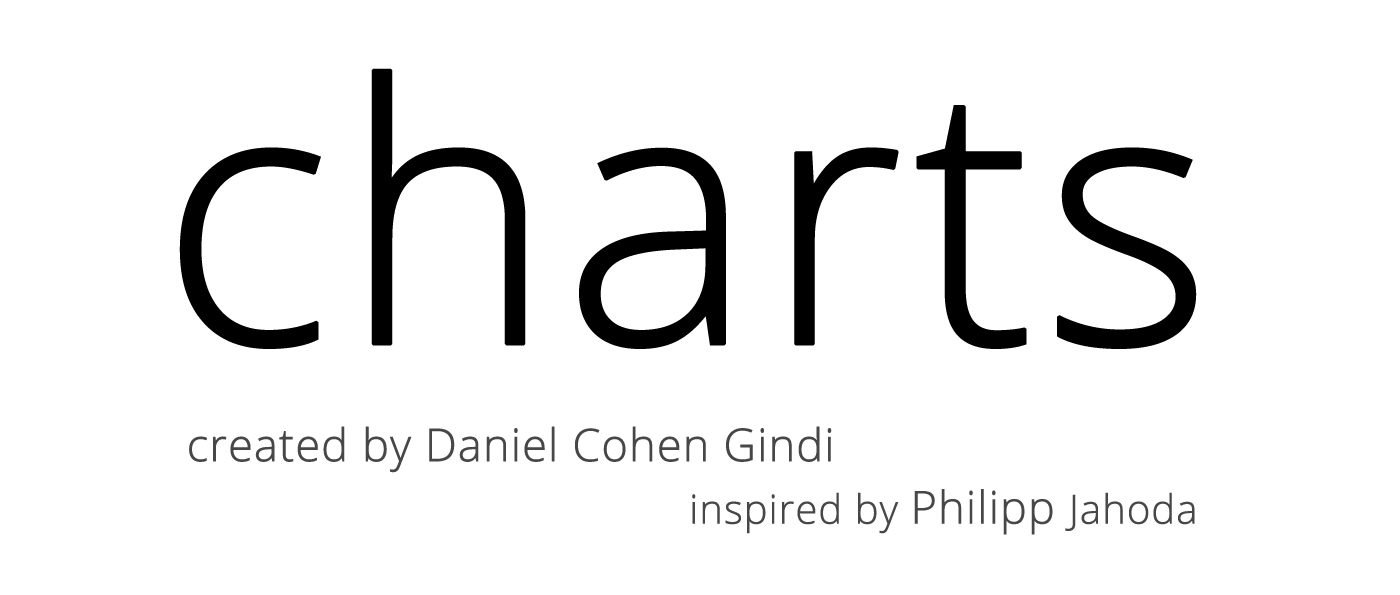
<style>
.page{position:relative;width:1400px;height:595px;background:#ffffff}
.page>*{position:absolute;margin:0}
.t1{font:360px "OpenSans-Light";color:#000000;font-weight:bold}
.t2{font:45px "OpenSans-Light";color:#474747;font-weight:bold}
.t3{font:40px "OpenSans-Light";color:#474747;font-weight:bold}
</style>
<div class="page">
<p class="t1" style="left:179px;top:68px;width:1018px;height:281px">charts</p>
<p class="t2" style="left:189px;top:426px;width:643px;height:47px">created by Daniel Cohen Gindi</p>
<p class="t3" style="left:692px;top:489px;width:503px;height:46px">inspired by <span class="t2">Philipp </span>Jahoda</p>
</div>
